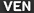
<style>
.page{position:relative;width:34px;height:13px}
.page>*{position:absolute;margin:0}
.t1{font:13.9px "K2D-ExtraBold";color:#ffffff}
</style>
<div class="page">
<p class="t1" style="left:3px;top:1px;width:28px;height:11px">VEN</p>
</div>
